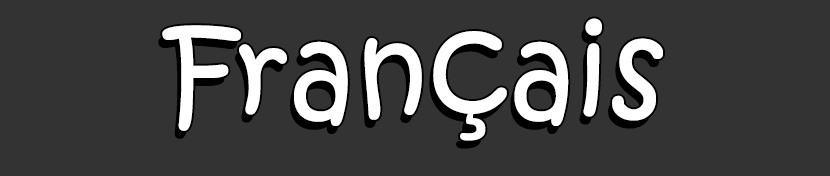
<style>
.page{position:relative;width:830px;height:176px;background:#333333}
.page>*{position:absolute;margin:0}
.t1{font:124.4px "KristenITC-Regular";color:#ffffff}
</style>
<div class="page">
<p class="t1" style="left:162px;top:18px;width:501px;height:123px">Français</p>
</div>
